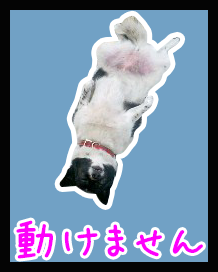
<style>
.page{position:relative;width:218px;height:272px;background:#71a1c5}
.page>*{position:absolute;margin:0}
.t1{font:48.8px "APJapanesefont";color:#fe00fb}
</style>
<div class="page">
<p class="t1" style="left:16px;top:220px;width:187px;height:39px">動けません</p>
</div>
